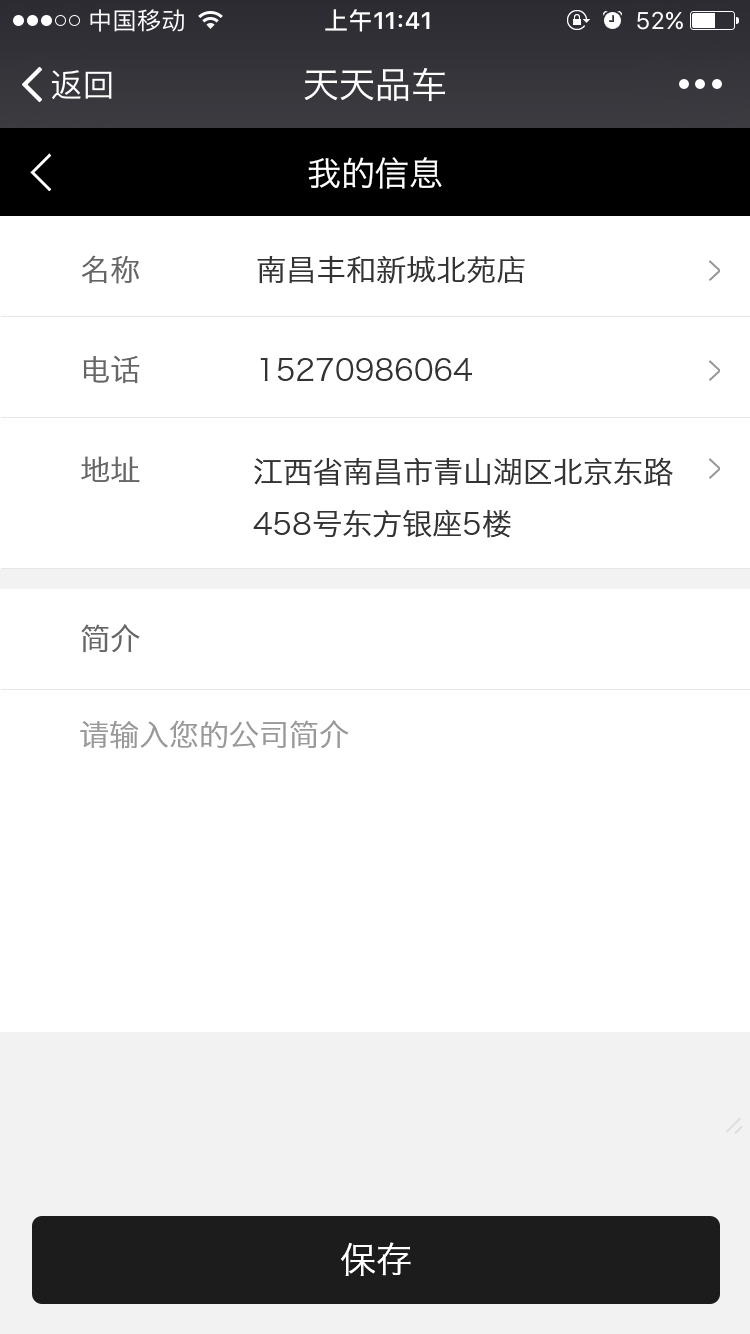
<style>
.page{position:relative;width:750px;height:1334px;background:#ffffff}
.page>*{position:absolute;margin:0}
.t1{font:36px "HiraginoSansGB-W3";color:#ffffff}
.t2{font:34px "HiraginoSansGB-W3";color:#ffffff}
.t3{font:30px/100px "HiraginoSansGB-W3";color:#666666}
.t4{font:30px/100px "HiraginoSansGB-W3";color:#333333}
.t5{font:30px "HiraginoSansGB-W3";color:#333333}
.t6{font:30px "HiraginoSansGB-W3";color:#666666}
.t7{font:30px "HiraginoSansGB-W3";color:#999999}
.t8{font:36px "HiraginoSansGB-W3";color:#ffffff;text-transform:uppercase}
</style>
<div class="page">
<p class="t1" style="left:304px;top:68px;width:141px;height:34px">天天品车</p>
<p class="t2" style="left:308px;top:157px;width:134px;height:32px">我的信息</p>
<p class="t3" style="left:81px;top:255px;width:59px;height:228px">名称<br>电话<br>地址</p>
<p class="t4" style="left:257px;top:255px;width:268px;height:127px">南昌丰和新城北苑店<br>15270986064</p>
<p class="t5" style="left:253px;top:457px;width:420px;height:81px">江西省南昌市青山湖区北京东路<br>458号东方银座5楼</p>
<p class="t6" style="left:81px;top:624px;width:59px;height:29px">简介</p>
<p class="t7" style="left:80px;top:720px;width:269px;height:29px">请输入您的公司简介</p>
<p class="t8" style="left:341px;top:1242px;width:70px;height:34px">保存</p>
</div>
